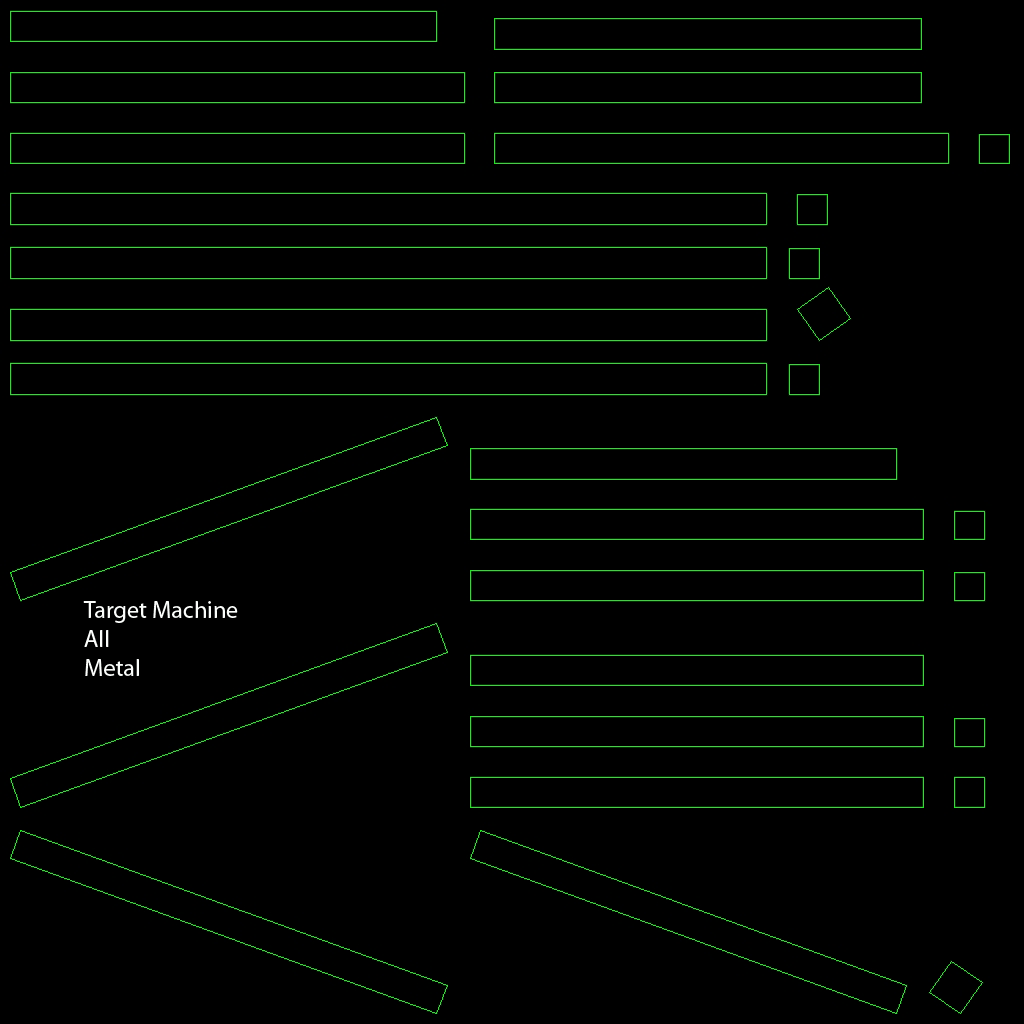
<style>
.page{position:relative;width:1024px;height:1024px;background:#000000}
.page>*{position:absolute;margin:0}
.t1{font:24px "MyriadPro-Regular";color:#fbfdfb}
</style>
<div class="page">
<p class="t1" style="left:83px;top:601px;width:155px;height:75px">Target Machine<br>All<br>Metal</p>
</div>
